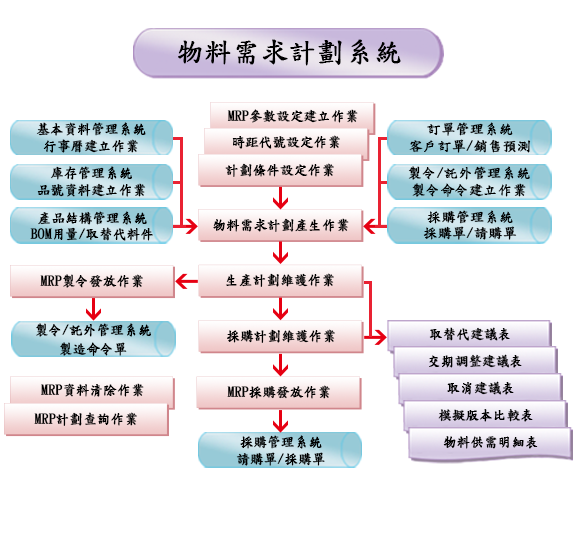
<style>
.page{position:relative;width:577px;height:545px;background:#ffffff}
.page>*{position:absolute;margin:0}
.t1{font:27.5px "DFKaiShu-SB-Estd-BF";color:#000000;font-weight:bold}
.t2{font:13.7px "DFKaiShu-SB-Estd-BF";color:#000000;font-weight:bold}
.t3{font:13.7px/16.5px "DFKaiShu-SB-Estd-BF";color:#000000;font-weight:bold}
.t4{font:13.7px/16.5px "DFKaiShu-SB-Estd-BF";letter-spacing:-0.2em;color:#000000;font-weight:bold}
.t5{font:13.7px/19.2px "DFKaiShu-SB-Estd-BF";color:#000000;font-weight:bold}
</style>
<div class="page">
<p class="t1" style="left:178px;top:39px;width:223px;height:27px">物料需求計劃系統</p>
<p class="t2" style="left:227px;top:109px;width:131px;height:14px">MRP參數設定建立作業</p>
<p class="t3" style="left:36px;top:122px;width:110px;height:31px;text-align:center">基本資料管理系統<br>行事曆建立作業</p>
<p class="t3" style="left:409px;top:122px;width:122px;height:31px;text-align:center">訂單管理系統<br>客戶訂單/銷售預測</p>
<p class="t2" style="left:232px;top:135px;width:108px;height:14px">時距代號設定作業</p>
<p class="t3" style="left:37px;top:166px;width:109px;height:31px;text-align:center">庫存管理系統<br>品號資料建立作業</p>
<p class="t2" style="left:225px;top:163px;width:109px;height:14px">計劃條件設定作業</p>
<p class="t3" style="left:408px;top:166px;width:122px;height:31px;text-align:center">製令/託外管理系統<br>製令命令建立作業</p>
<p class="t3" style="left:30px;top:211px;width:123px;height:30px;text-align:center">產品結構管理系統<br>BO<span class="t4">M 用量 </span>/取替代料件</p>
<p class="t2" style="left:213px;top:218px;width:136px;height:14px">物料需求計劃產生作業</p>
<p class="t3" style="left:423px;top:210px;width:94px;height:30px;text-align:center">採購管理系統<br>採購單/請購單</p>
<p class="t2" style="left:40px;top:274px;width:103px;height:14px">MRP製令發放作業</p>
<p class="t2" style="left:226px;top:273px;width:108px;height:14px">生產計劃維護作業</p>
<p class="t5" style="left:36px;top:323px;width:115px;height:33px;text-align:center">製令/託外管理系統<br>製造命令單</p>
<p class="t2" style="left:227px;top:329px;width:108px;height:14px">採購計劃維護作業</p>
<p class="t2" style="left:429px;top:327px;width:81px;height:14px">取替代建議表</p>
<p class="t2" style="left:429px;top:354px;width:93px;height:14px">交期調整建議表</p>
<p class="t2" style="left:41px;top:383px;width:103px;height:14px">MRP資料清除作業</p>
<p class="t2" style="left:227px;top:385px;width:103px;height:14px">MRP採購發放作業</p>
<p class="t2" style="left:447px;top:381px;width:67px;height:14px">取消建議表</p>
<p class="t2" style="left:34px;top:412px;width:103px;height:14px">MRP計劃查詢作業</p>
<p class="t2" style="left:438px;top:409px;width:95px;height:13px">模擬版本比較表</p>
<p class="t3" style="left:236px;top:435px;width:89px;height:31px;text-align:center">採購管理系統<br>請購單/採購單</p>
<p class="t2" style="left:443px;top:436px;width:95px;height:13px">物料供需明細表</p>
</div>
